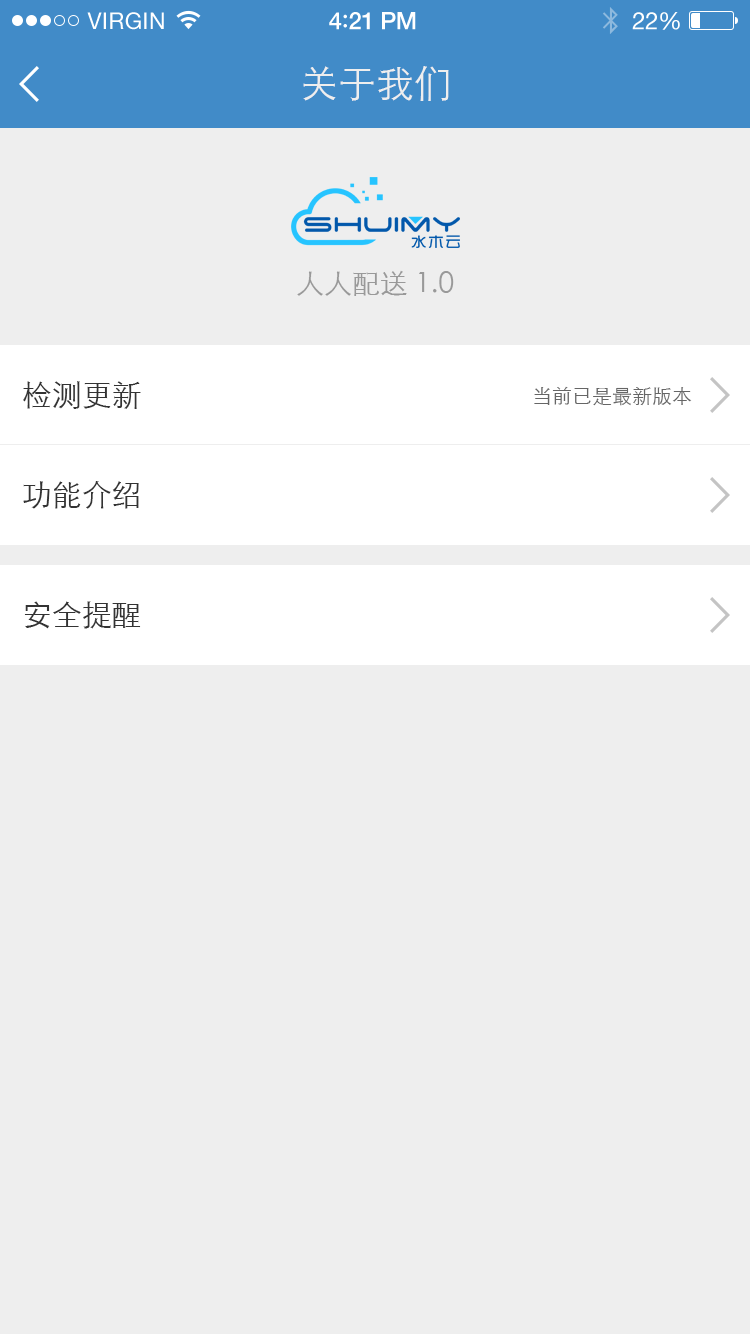
<style>
.page{position:relative;width:750px;height:1334px;background:#eeeeee}
.page>*{position:absolute;margin:0}
.t1{font:23px "HelveticaNeue";letter-spacing:0.02em;color:#ffffff}
.t2{font:24px "HelveticaNeue-Medium";letter-spacing:-0.02em;color:#ffffff}
.t3{font:26px "Avenir-Medium";letter-spacing:-0.02em;color:#ffffff}
.t4{font:24px "HelveticaNeue";letter-spacing:-0.02em;color:#ffffff}
.t5{font:38px "STXihei";color:#eeeeee}
.t6{font:28px "STXihei";color:#999999}
.t7{font:30px "STXihei";color:#333333}
.t8{font:20px "STXihei";color:#666666}
</style>
<div class="page">
<p class="t1" style="left:87px;top:12px;width:77px;height:18px">VIRGIN</p>
<p class="t2" style="left:329px;top:12px;width:87px;height:18px">4<span class="t3">:</span>21 PM</p>
<p class="t4" style="left:632px;top:12px;width:48px;height:18px">22%</p>
<p class="t5" style="left:303px;top:66px;width:146px;height:35px">关于我们</p>
<p class="t6" style="left:297px;top:270px;width:157px;height:26px">人人配送1.0</p>
<p class="t7" style="left:23px;top:381px;width:118px;height:28px">检测更新</p>
<p class="t8" style="left:534px;top:386px;width:158px;height:20px">当前已是最新版本</p>
<p class="t7" style="left:23px;top:481px;width:116px;height:28px">功能介绍</p>
<p class="t7" style="left:24px;top:601px;width:117px;height:28px">安全提醒</p>
</div>
